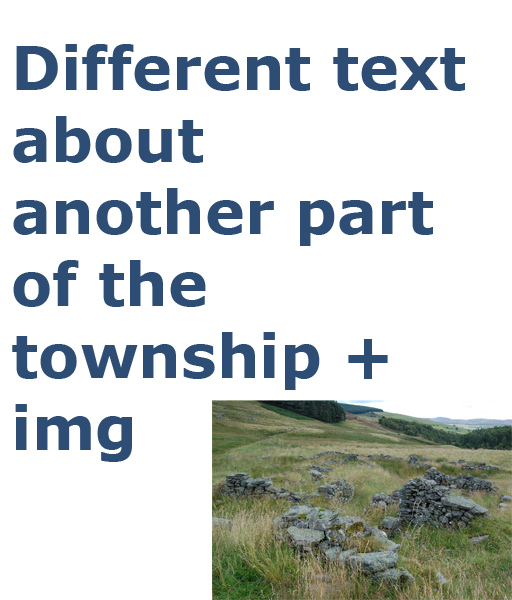
<style>
.page{position:relative;width:512px;height:600px;background:#ffffff}
.page>*{position:absolute;margin:0}
.t1{font:60px "Verdana-Bold";color:#2d4d74}
</style>
<div class="page">
<p class="t1" style="left:12px;top:44px;width:453px;height:418px">Different text<br>about<br>another part<br>of the <br>township + img</p>
</div>
